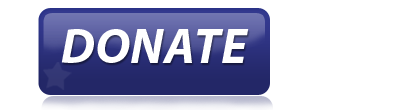
<style>
.page{position:relative;width:400px;height:110px;background:#ffffff}
.page>*{position:absolute;margin:0}
.t1{font:50px "MyriadPro-BoldIt";color:#ffffff}
</style>
<div class="page">
<p class="t1" style="left:61px;top:29px;width:188px;height:34px">DONATE</p>
</div>
